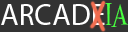
<style>
.page{position:relative;width:128px;height:32px;background:#333333}
.page>*{position:absolute;margin:0}
.t1{font:30px "MyriadPro-Regular";color:#ffffff}
.t2{font:34.2px "Wonder-Night";color:#49ff40}
</style>
<div class="page">
<p class="t1" style="left:1px;top:4px;width:104px;height:21px">ARCADE</p>
<p class="t2" style="left:105px;top:3px;width:24px;height:24px">IA</p>
</div>
